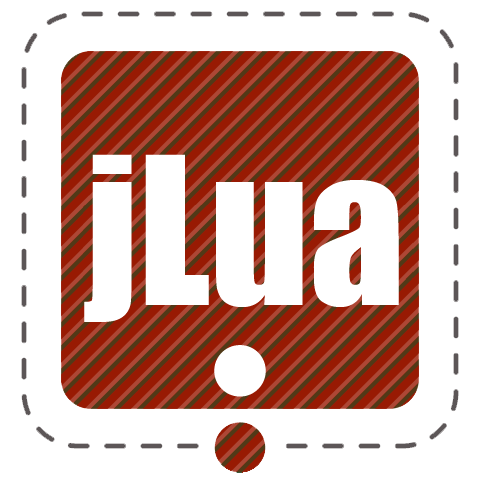
<style>
.page{position:relative;width:480px;height:480px;background:#ffffff}
.page>*{position:absolute;margin:0}
.t1{font:190px "Impact";color:#ffffff}
</style>
<div class="page">
<p class="t1" style="left:84px;top:154px;width:315px;height:168px">jLua</p>
</div>
